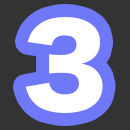
<style>
.page{position:relative;width:130px;height:130px;background:#333333}
.page>*{position:absolute;margin:0}
.t1{font:110.5px "HiraKakuStdN-W8";color:#ffffff}
</style>
<div class="page">
<p class="t1" style="left:25px;top:17px;width:78px;height:96px">３</p>
</div>
